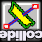
<style>
.page{position:relative;width:42px;height:42px}
.page>*{position:absolute;margin:0}
.t1{font:13.7px "Arial-Black";letter-spacing:-0.075em;color:#eeeaf6}
</style>
<div class="page">
<p class="t1" style="left:0px;top:30px;width:43px;height:11px;rotate:-180deg">collide</p>
</div>
